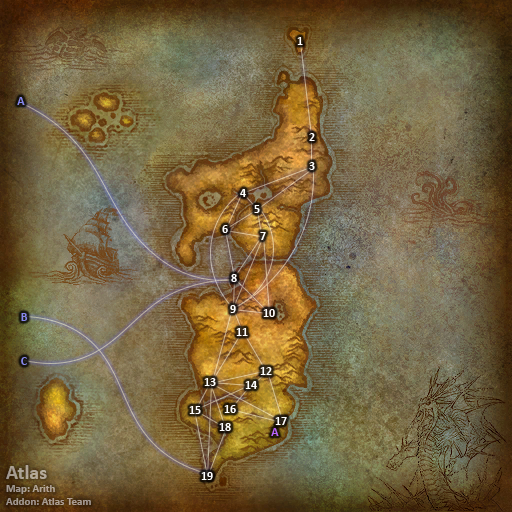
<style>
.page{position:relative;width:512px;height:512px}
.page>*{position:absolute;margin:0}
.t1{font:12px "Calibri-Bold";color:#ffffff}
.t2{font:12px "Calibri-Bold";color:#8788ee}
.t3{font:12px "Calibri-Bold";color:#bb66ff}
.t4{font:11px "Calibri-Bold";color:#aca092}
.t5{font:20px "Calibri-Bold";color:#aca092}
</style>
<div class="page">
<p class="t1" style="left:297px;top:37px;width:6px;height:8px">1</p>
<p class="t2" style="left:17px;top:97px;width:8px;height:8px">A</p>
<p class="t1" style="left:309px;top:133px;width:6px;height:8px">2</p>
<p class="t1" style="left:309px;top:162px;width:6px;height:8px">3</p>
<p class="t1" style="left:240px;top:189px;width:6px;height:8px">4</p>
<p class="t1" style="left:254px;top:205px;width:6px;height:8px">5</p>
<p class="t1" style="left:222px;top:225px;width:6px;height:8px">6</p>
<p class="t1" style="left:260px;top:232px;width:6px;height:8px">7</p>
<p class="t1" style="left:231px;top:274px;width:6px;height:8px">8</p>
<p class="t1" style="left:230px;top:305px;width:6px;height:8px">9</p>
<p class="t2" style="left:21px;top:313px;width:7px;height:8px">B</p>
<p class="t1" style="left:263px;top:309px;width:12px;height:8px">10</p>
<p class="t1" style="left:236px;top:328px;width:12px;height:8px">11</p>
<p class="t2" style="left:21px;top:357px;width:6px;height:8px">C</p>
<p class="t1" style="left:260px;top:367px;width:12px;height:8px">12</p>
<p class="t1" style="left:204px;top:378px;width:12px;height:8px">13</p>
<p class="t1" style="left:245px;top:381px;width:12px;height:8px">14</p>
<p class="t1" style="left:189px;top:406px;width:12px;height:8px">15</p>
<p class="t1" style="left:224px;top:405px;width:12px;height:8px">16</p>
<p class="t1" style="left:219px;top:423px;width:12px;height:8px">18</p>
<p class="t1" style="left:275px;top:417px;width:12px;height:8px">17</p>
<p class="t3" style="left:271px;top:428px;width:8px;height:8px">A</p>
<p class="t4" style="left:6px;top:465px;width:85px;height:40px"><span class="t5">Atlas<br></span>Map: Arith<br>Addon: Atlas Team</p>
<p class="t1" style="left:201px;top:472px;width:12px;height:8px">19</p>
</div>
